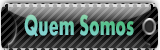
<style>
.page{position:relative;width:160px;height:50px}
.page>*{position:absolute;margin:0}
.t1{font:29.5px "Aharoni-Bold";scale:0.6 1}
</style>
<div class="page">
<p class="t1" style="left:24px;top:14px;width:110px;height:23px">Quem Somos</p>
</div>
